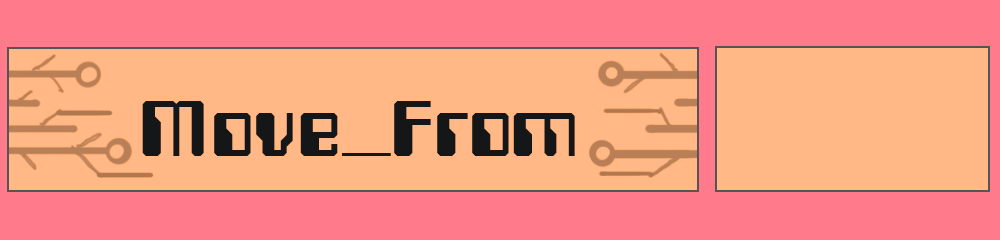
<style>
.page{position:relative;width:1000px;height:240px;background:#ffb886}
.page>*{position:absolute;margin:0}
.t1{font:91.7px "Computerfont";color:#171615}
</style>
<div class="page">
<p class="t1" style="left:142px;top:101px;width:433px;height:55px">Move_From</p>
</div>
